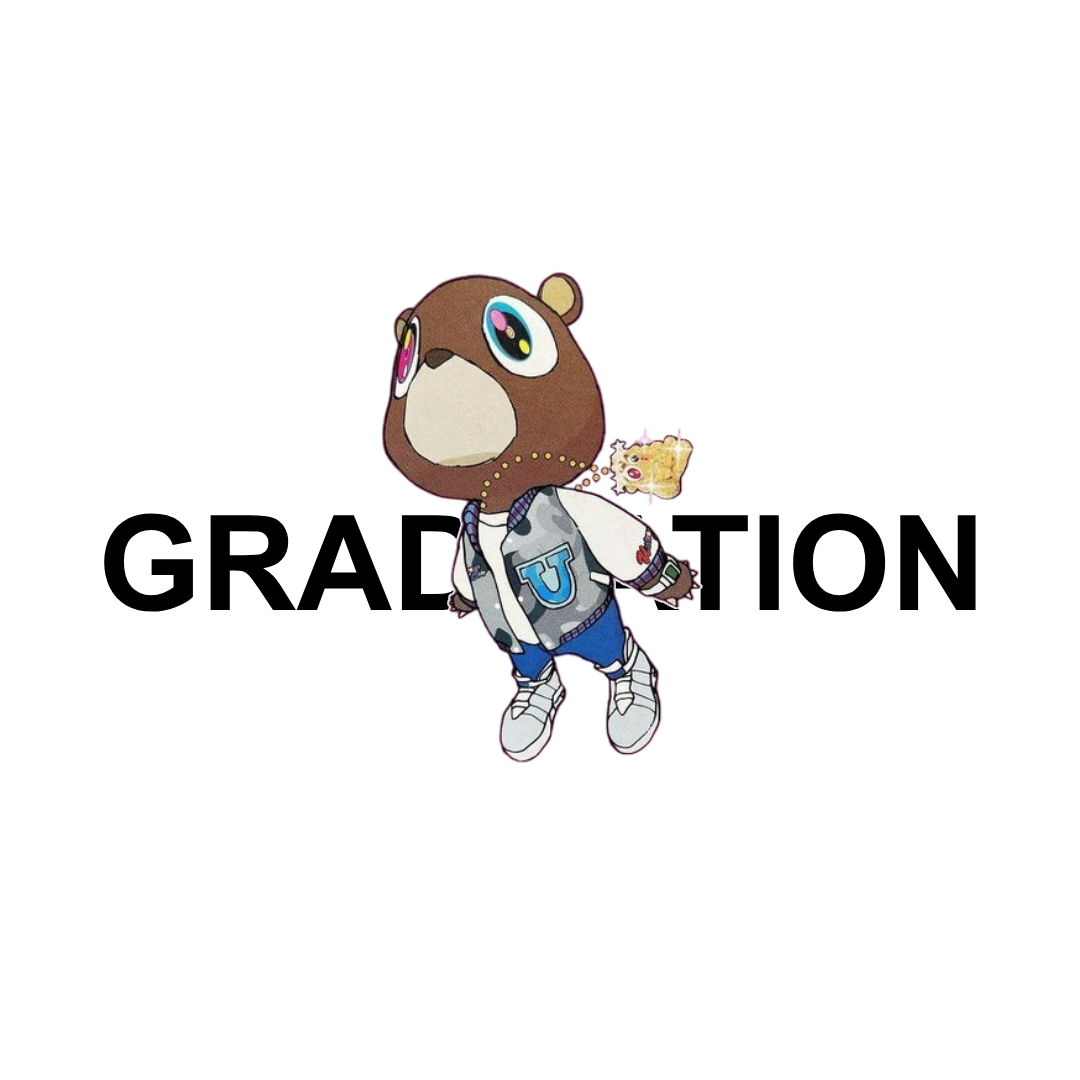
<style>
.page{position:relative;width:1080px;height:1080px;background:#ffffff}
.page>*{position:absolute;margin:0}
.t1{font:132.5px "Arial-BoldMT";color:#000000}
</style>
<div class="page">
<p class="t1" style="left:104px;top:513px;width:872px;height:99px">GRADUATION</p>
</div>
